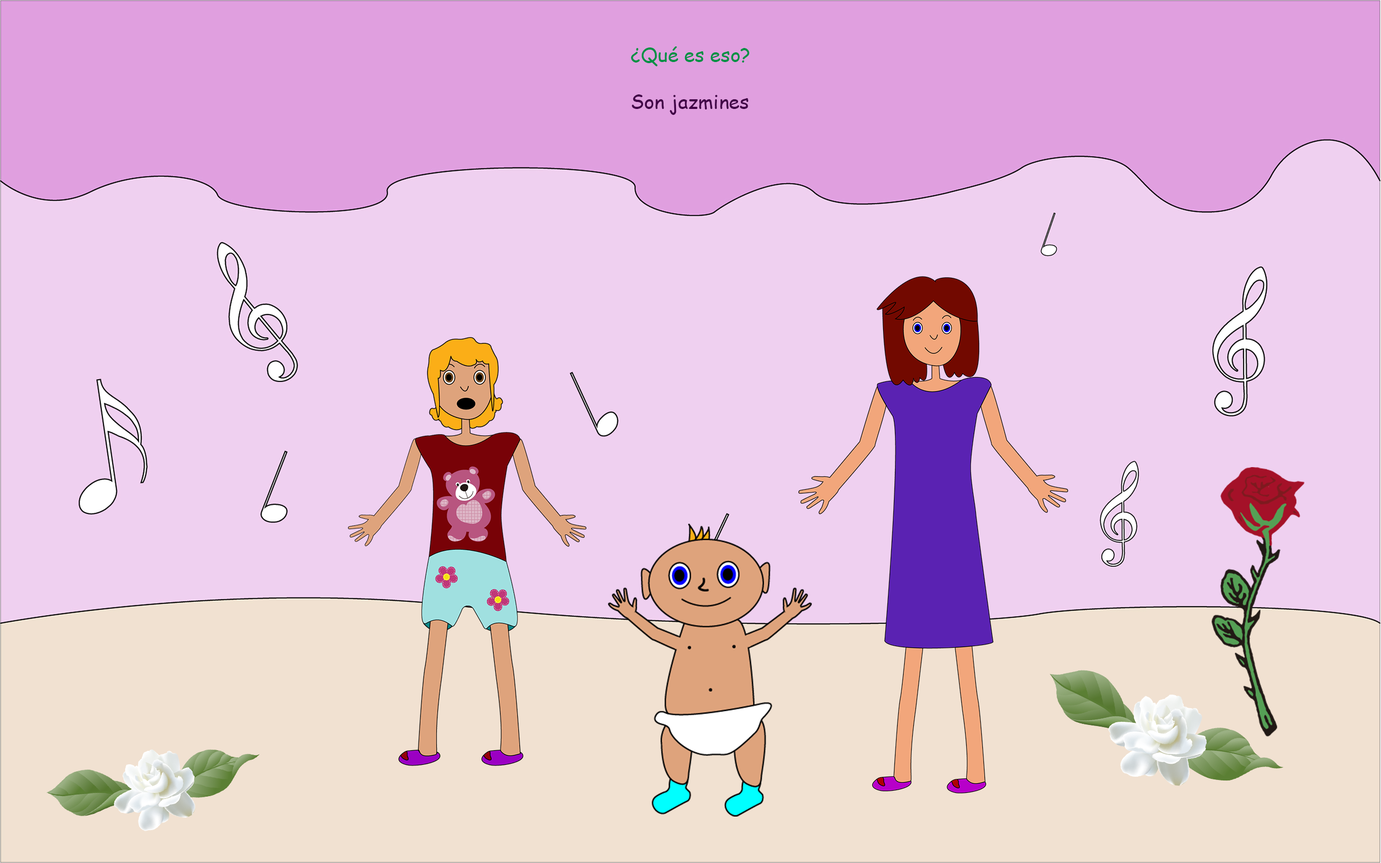
<style>
.page{position:relative;width:1381px;height:863px;background:#efd0f0}
.page>*{position:absolute;margin:0}
.t1{font:19.4px "ComicSansMS";color:#009045}
.t2{font:19.4px "ComicSansMS";color:#410047}
</style>
<div class="page">
<p class="t1" style="left:631px;top:46px;width:118px;height:69px">¿Qué es eso?<br><br><span class="t2">Son jazmines</span></p>
</div>
